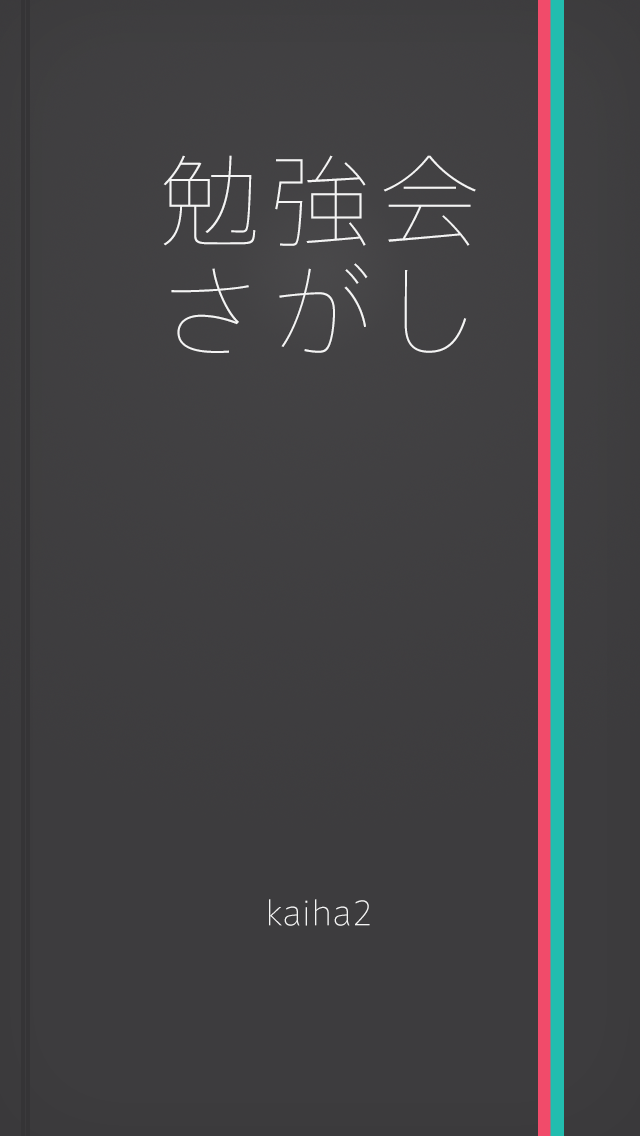
<style>
.page{position:relative;width:640px;height:1136px;background:#3d3c3e}
.page>*{position:absolute;margin:0}
.t1{font:100px/110px "AxisStd-UltraLight";letter-spacing:0.1em;color:#f4f4f4}
.t2{font:32px "AxisStd-ExtraLight";color:#f4f4f4}
</style>
<div class="page">
<p class="t1" style="left:163px;top:155px;width:313px;height:198px;text-align:center">勉強会<br>さがし</p>
<p class="t2" style="left:269px;top:899px;width:101px;height:27px">kaiha2</p>
</div>
